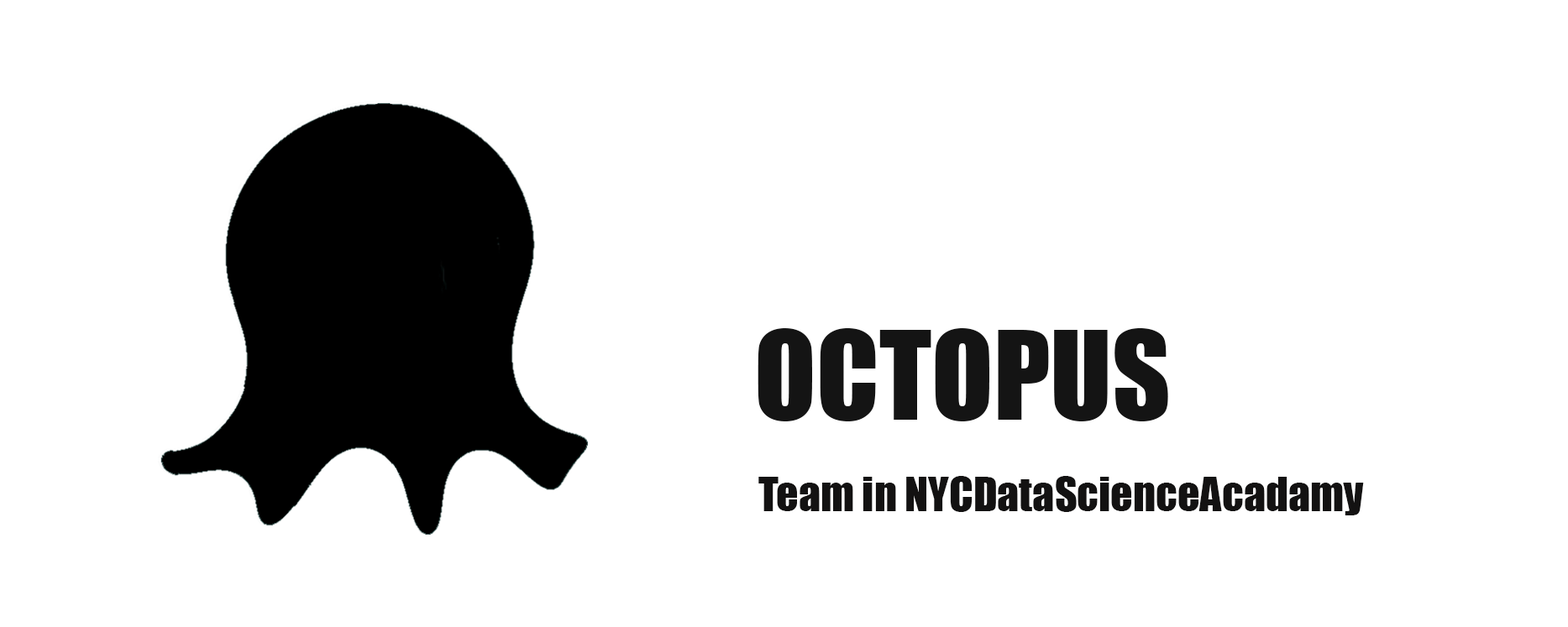
<style>
.page{position:relative;width:1568px;height:627px;background:#ffffff}
.page>*{position:absolute;margin:0}
.t1{font:113.4px "Impact";color:#141414}
.t2{font:43.7px "Impact";color:#131212}
</style>
<div class="page">
<p class="t1" style="left:758px;top:328px;width:410px;height:94px">OCTOPUS</p>
<p class="t2" style="left:758px;top:476px;width:606px;height:40px">Team in NYCDataScienceAcadamy</p>
</div>
